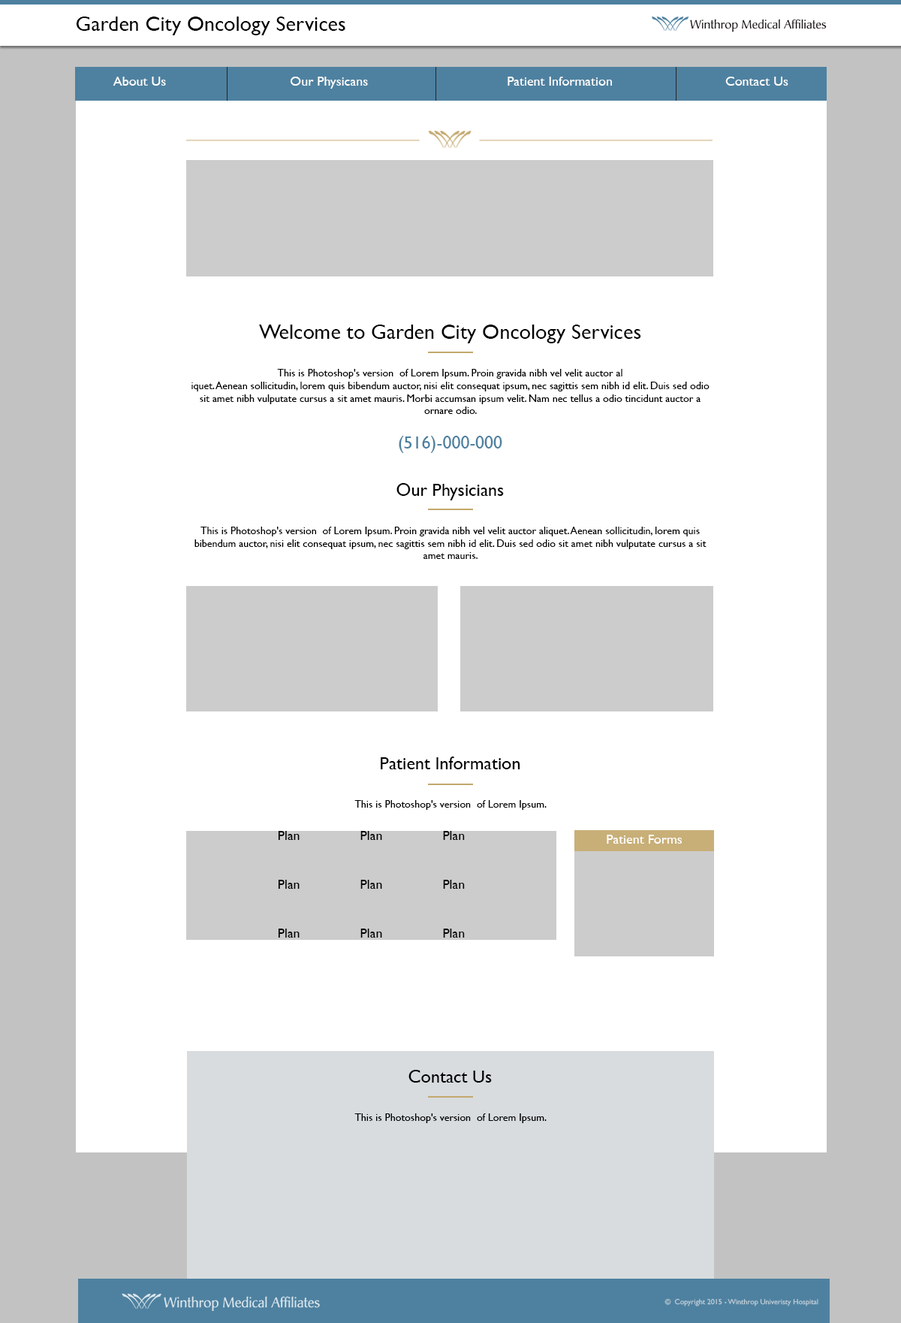
<style>
.page{position:relative;width:901px;height:1323px;background:#ffffff}
.page>*{position:absolute;margin:0}
.t1{font:21px "GillSans";color:#000000}
.t2{font:13.5px "GillSans";color:#ffffff}
.t3{font:10.5px "GillSans";color:#000000}
.t4{font:18px "GillSans";color:#4e81a0}
.t5{font:18px "GillSans";color:#000000}
.t6{font:13.5px "GillSans";color:#000000}
.t7{font:7.5px "GillSans";color:#bdccd7}
</style>
<div class="page">
<p class="t1" style="left:76px;top:17px;width:270px;height:18px">Garden City Oncology Services</p>
<p class="t2" style="left:113px;top:77px;width:676px;height:12px">About Us                                 Our Physicans                                     Patient Information                              Contact Us</p>
<p class="t3" style="left:192px;top:325px;width:518px;height:128px;text-align:center"><span class="t1">Welcome to Garden City Oncology Services<br></span><br><br>This is Photoshop's version  of Lorem Ipsum. Proin gravida nibh vel velit auctor al<br>iquet. Aenean sollicitudin, lorem quis bibendum auctor, nisi elit consequat ipsum, nec sagittis sem nibh id elit. Duis sed odio sit amet nibh vulputate cursus a sit amet mauris. Morbi accumsan ipsum velit. Nam nec tellus a odio tincidunt auctor a ornare odio. <br><br><span class="t4">(516)-000-000</span></p>
<p class="t3" style="left:195px;top:483px;width:512px;height:76px;text-align:center"><span class="t5">Our Physicians <br></span><br><br>This is Photoshop's version  of Lorem Ipsum. Proin gravida nibh vel velit auctor aliquet. Aenean sollicitudin, lorem quis bibendum auctor, nisi elit consequat ipsum, nec sagittis sem nibh id elit. Duis sed odio sit amet nibh vulputate cursus a sit amet mauris.</p>
<p class="t3" style="left:355px;top:756px;width:192px;height:54px;text-align:center"><span class="t5">Patient Information<br></span><br><br>This is Photoshop's version  of Lorem Ipsum.</p>
<p class="t6" style="left:278px;top:831px;width:187px;height:106px;text-align:center">Plan                Plan                Plan <br><br><br>Plan                Plan                Plan <br><br><br>Plan                Plan                Plan</p>
<p class="t2" style="left:607px;top:835px;width:75px;height:9px">Patient Forms</p>
<p class="t3" style="left:355px;top:1070px;width:192px;height:53px;text-align:center"><span class="t5">Contact Us<br></span><br><br>This is Photoshop's version  of Lorem Ipsum.</p>
<p class="t7" style="left:665px;top:1298px;width:154px;height:8px">©  Copyright 2015 - Winthrop Univeristy Hospital</p>
</div>
